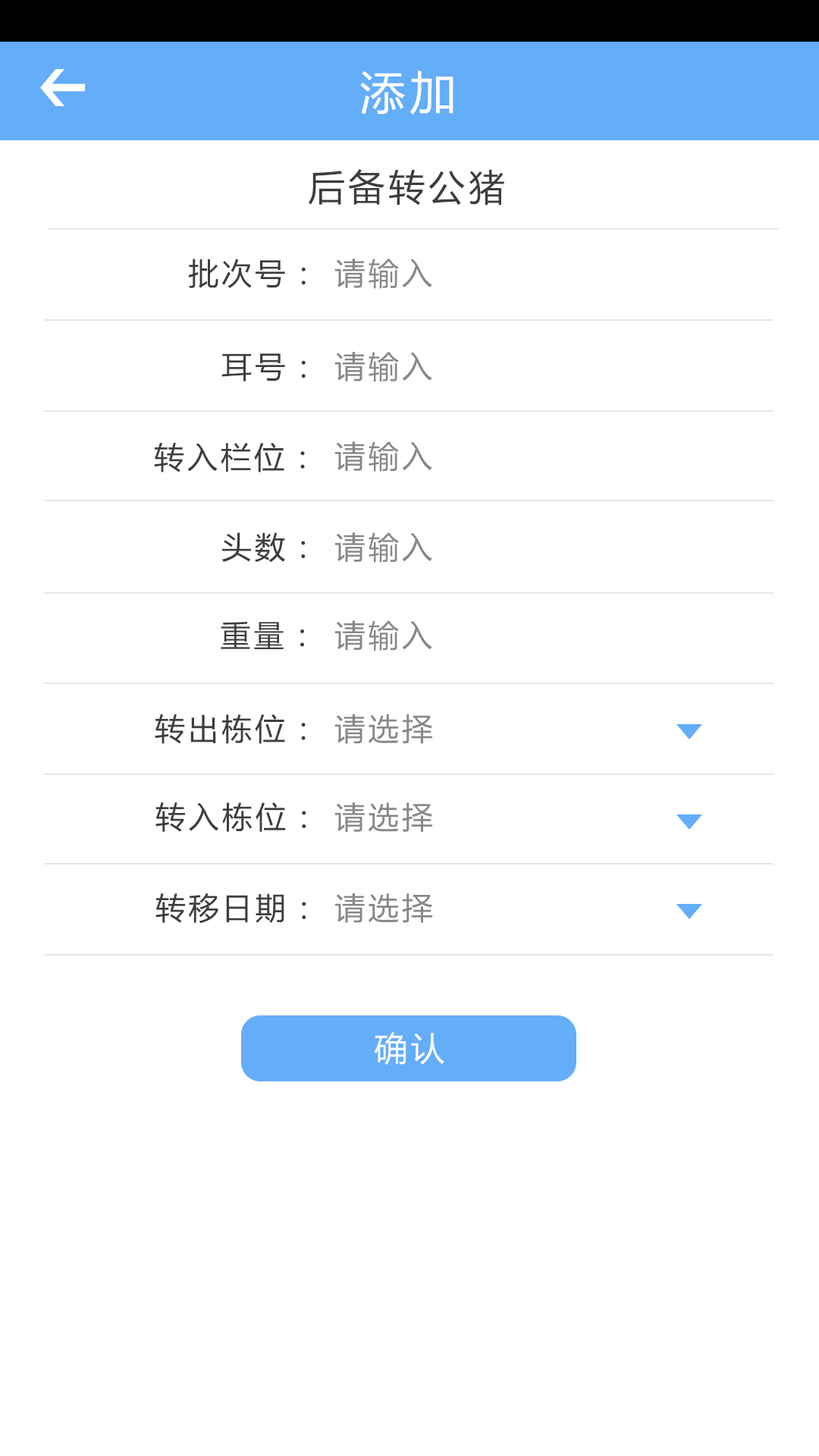
<style>
.page{position:relative;width:819px;height:1456px;background:#ffffff}
.page>*{position:absolute;margin:0}
.t1{font:45.5px "MicrosoftYaHei";letter-spacing:0.1em;color:#ffffff}
.t2{font:36.4px "MicrosoftYaHei";letter-spacing:0.1em;color:#3d3d3d}
.t3{font:30.3px "MicrosoftYaHei";letter-spacing:0.1em;color:#3d3d3d}
.t4{font:30.7px "MicrosoftYaHei";letter-spacing:0.1em;color:#898888}
.t5{font:33.4px "MicrosoftYaHei";letter-spacing:0.1em;color:#ffffff}
</style>
<div class="page">
<p class="t1" style="left:360px;top:71px;width:93px;height:44px">添加</p>
<p class="t2" style="left:309px;top:169px;width:195px;height:37px">后备转公猪</p>
<p class="t3" style="left:188px;top:259px;width:118px;height:29px">批次号：</p>
<p class="t4" style="left:334px;top:259px;width:98px;height:30px">请输入</p>
<p class="t3" style="left:221px;top:353px;width:85px;height:28px">耳号：</p>
<p class="t4" style="left:334px;top:352px;width:98px;height:30px">请输入</p>
<p class="t3" style="left:154px;top:442px;width:151px;height:30px">转入栏位：</p>
<p class="t4" style="left:334px;top:441px;width:98px;height:31px">请输入</p>
<p class="t3" style="left:221px;top:532px;width:85px;height:31px">头数：</p>
<p class="t4" style="left:334px;top:532px;width:98px;height:31px">请输入</p>
<p class="t3" style="left:221px;top:622px;width:83px;height:27px">重量：</p>
<p class="t4" style="left:334px;top:620px;width:98px;height:31px">请输入</p>
<p class="t3" style="left:155px;top:714px;width:151px;height:30px">转出栋位：</p>
<p class="t4" style="left:334px;top:714px;width:98px;height:30px">请选择</p>
<p class="t3" style="left:155px;top:802px;width:151px;height:30px">转入栋位：</p>
<p class="t4" style="left:334px;top:802px;width:98px;height:30px">请选择</p>
<p class="t3" style="left:155px;top:893px;width:151px;height:31px">转移日期：</p>
<p class="t4" style="left:334px;top:893px;width:98px;height:30px">请选择</p>
<p class="t5" style="left:374px;top:1032px;width:70px;height:33px">确认</p>
</div>
